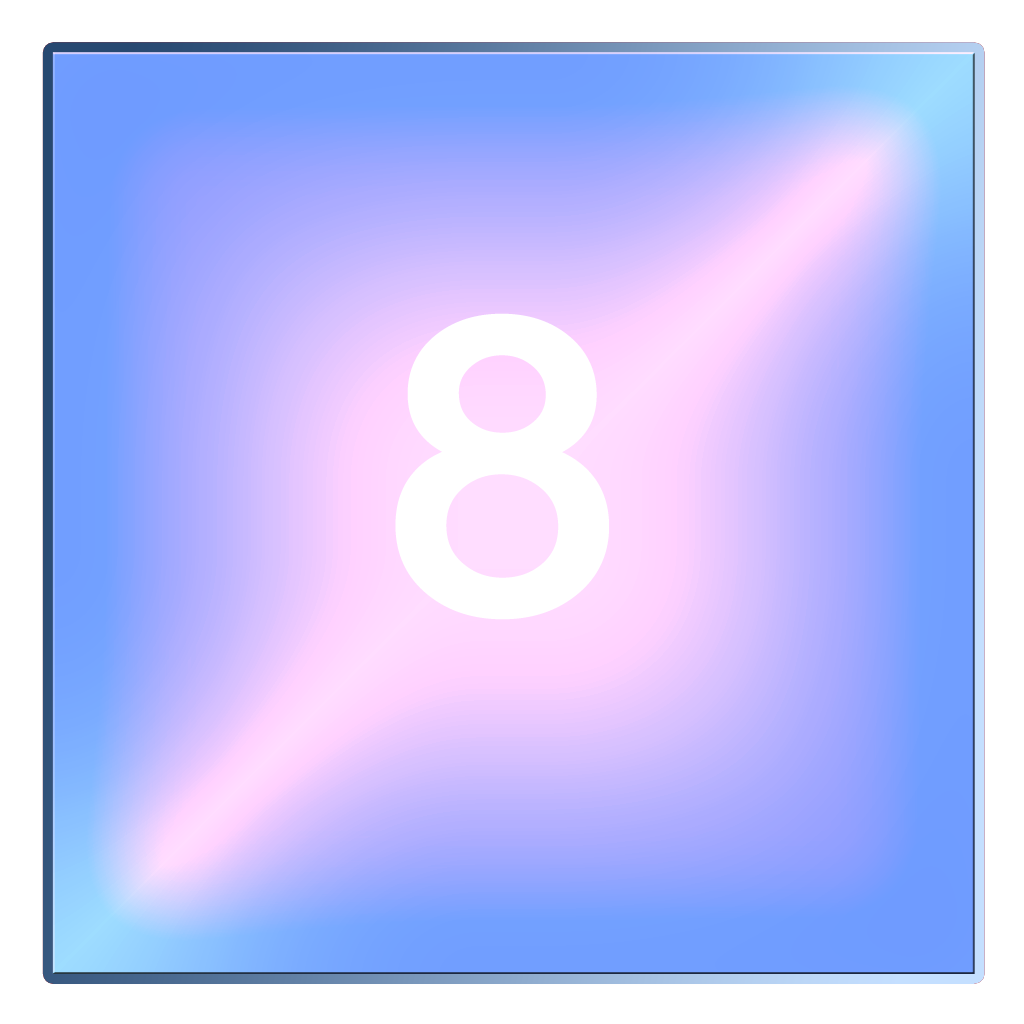
<style>
.page{position:relative;width:1024px;height:1024px}
.page>*{position:absolute;margin:0}
.t1{font:400px "ArialNarrow";color:#ffffff;font-weight:bold;scale:1.3 1}
</style>
<div class="page">
<p class="t1" style="left:395px;top:313px;width:214px;height:307px">8</p>
</div>
